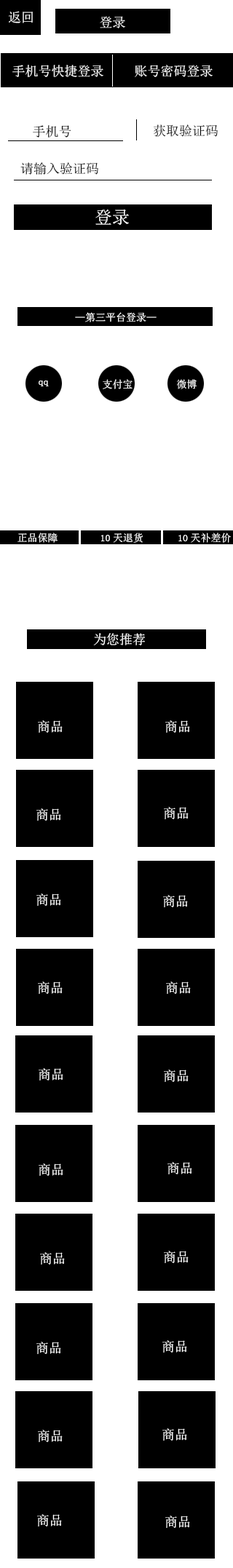
<style>
.page{position:relative;width:233px;height:1568px;background:#ffffff}
.page>*{position:absolute;margin:0}
.t1{font:13.1px "SimSun";color:#ffffff}
.t2{font:13.1px "SimSun";color:#000000}
.t3{font:13.1px "SimSun";color:#010101}
.t4{font:17.5px "SimSun";color:#fefefe}
.t5{font:10.2px "SimSun";color:#fefefe}
</style>
<div class="page">
<p class="t1" style="left:9px;top:11px;width:24px;height:12px">返回</p>
<p class="t1" style="left:100px;top:16px;width:25px;height:12px">登录</p>
<p class="t1" style="left:12px;top:65px;width:91px;height:12px">手机号快捷登录</p>
<p class="t1" style="left:135px;top:65px;width:77px;height:12px">账号密码登录</p>
<p class="t2" style="left:33px;top:125px;width:38px;height:13px">手机号</p>
<p class="t2" style="left:154px;top:124px;width:64px;height:13px">获取验证码</p>
<p class="t3" style="left:20px;top:162px;width:78px;height:13px">请输入验证码</p>
<p class="t4" style="left:95px;top:209px;width:34px;height:17px">登录</p>
<p class="t5" style="left:75px;top:312px;width:81px;height:10px">—第三平台登录—</p>
<p class="t5" style="left:39px;top:381px;width:10px;height:5px">qq</p>
<p class="t5" style="left:103px;top:379px;width:29px;height:10px">支付宝</p>
<p class="t5" style="left:177px;top:379px;width:19px;height:10px">微博</p>
<p class="t5" style="left:17px;top:533px;width:40px;height:10px">正品保障</p>
<p class="t5" style="left:101px;top:533px;width:42px;height:10px">10天退货</p>
<p class="t5" style="left:178px;top:533px;width:53px;height:10px">10天补差价</p>
<p class="t1" style="left:93px;top:633px;width:52px;height:12px">为您推荐</p>
<p class="t1" style="left:38px;top:720px;width:25px;height:13px">商品</p>
<p class="t1" style="left:165px;top:720px;width:25px;height:13px">商品</p>
<p class="t1" style="left:36px;top:808px;width:25px;height:13px">商品</p>
<p class="t1" style="left:164px;top:807px;width:24px;height:12px">商品</p>
<p class="t1" style="left:36px;top:894px;width:25px;height:12px">商品</p>
<p class="t1" style="left:163px;top:895px;width:25px;height:12px">商品</p>
<p class="t1" style="left:38px;top:982px;width:25px;height:12px">商品</p>
<p class="t1" style="left:166px;top:982px;width:25px;height:12px">商品</p>
<p class="t1" style="left:39px;top:1068px;width:24px;height:13px">商品</p>
<p class="t1" style="left:164px;top:1070px;width:24px;height:12px">商品</p>
<p class="t1" style="left:39px;top:1163px;width:24px;height:13px">商品</p>
<p class="t1" style="left:167px;top:1162px;width:25px;height:12px">商品</p>
<p class="t1" style="left:40px;top:1252px;width:25px;height:13px">商品</p>
<p class="t1" style="left:164px;top:1251px;width:24px;height:12px">商品</p>
<p class="t1" style="left:36px;top:1342px;width:25px;height:12px">商品</p>
<p class="t1" style="left:162px;top:1340px;width:25px;height:13px">商品</p>
<p class="t1" style="left:38px;top:1430px;width:25px;height:12px">商品</p>
<p class="t1" style="left:162px;top:1428px;width:25px;height:13px">商品</p>
<p class="t1" style="left:37px;top:1514px;width:25px;height:13px">商品</p>
<p class="t1" style="left:165px;top:1516px;width:25px;height:12px">商品</p>
</div>
